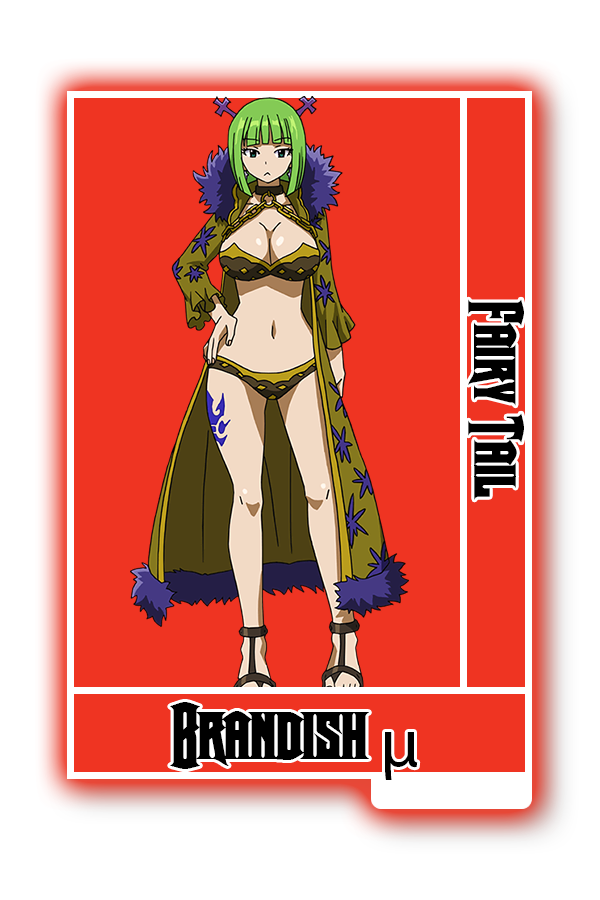
<style>
.page{position:relative;width:600px;height:900px;background:#ef3422}
.page>*{position:absolute;margin:0}
.t1{font:61.5px "Crown-Title";color:#000000}
.t2{font:70.1px "Crown-Title";color:#000000}
.t3{font:70.1px "MyriadPro-Regular";color:#000000}
</style>
<div class="page">
<p class="t1" style="left:468px;top:299px;width:56px;height:201px;rotate:90deg">Fairy Tail</p>
<p class="t2" style="left:170px;top:702px;width:248px;height:78px">Brandish <span class="t3">μ</span></p>
</div>
